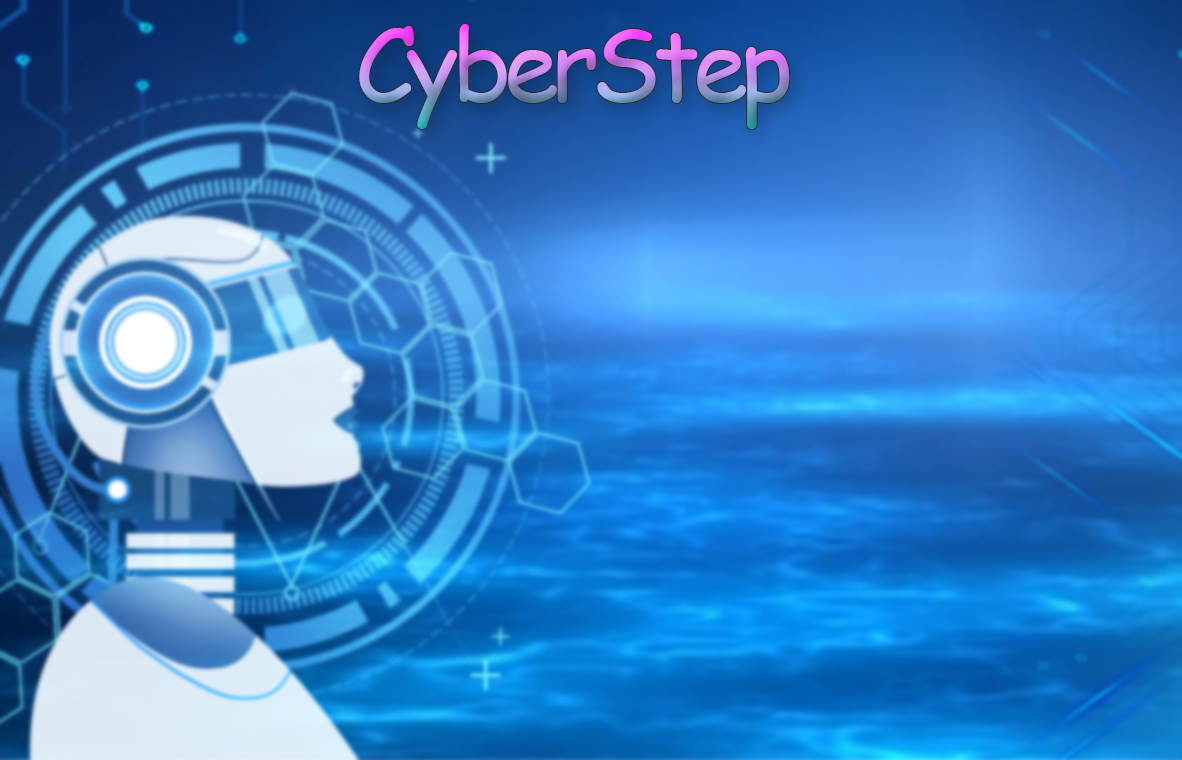
<style>
.page{position:relative;width:1182px;height:760px}
.page>*{position:absolute;margin:0}
.t1{font:100px "ComicSansMS";letter-spacing:-0.075em}
</style>
<div class="page">
<p class="t1" style="left:359px;top:24px;width:431px;height:105px">CyberStep</p>
</div>
